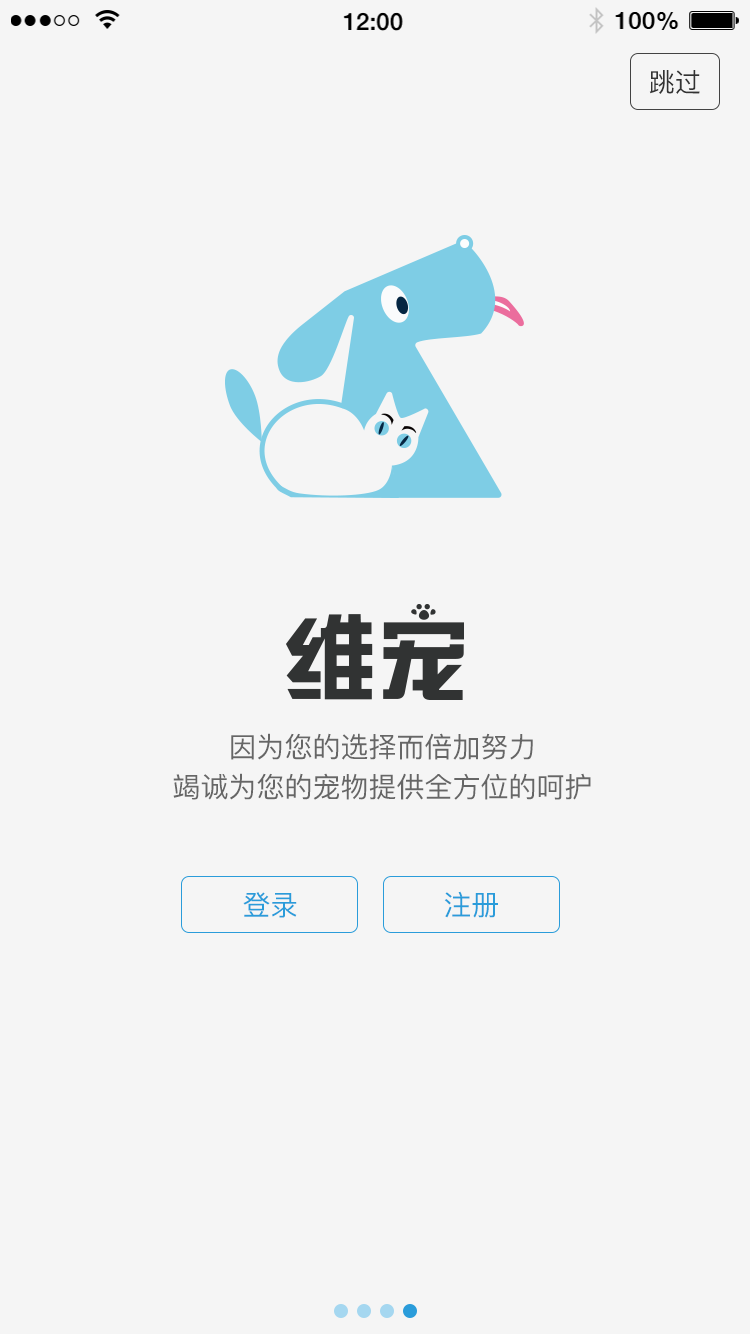
<style>
.page{position:relative;width:750px;height:1334px;background:#f5f5f5}
.page>*{position:absolute;margin:0}
.t1{font:26px "PingFangSC-Regular";color:#333333}
.t2{font:28px/40px "PingFangSC-Regular";color:#666666}
.t3{font:28px "PingFangSC-Regular";color:#2a9cda}
</style>
<div class="page">
<p class="t1" style="left:649px;top:70px;width:51px;height:24px">跳过</p>
<p class="t2" style="left:173px;top:733px;width:418px;height:67px;text-align:center">因为您的选择而倍加努力<br>竭诚为您的宠物提供全方位的呵护</p>
<p class="t3" style="left:243px;top:892px;width:54px;height:26px">登录</p>
<p class="t3" style="left:444px;top:891px;width:54px;height:27px">注册</p>
</div>
